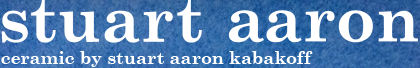
<style>
.page{position:relative;width:420px;height:68px}
.page>*{position:absolute;margin:0}
.t1{font:18px "CenturySchoolbook-Bold";color:#ffffff}
</style>
<div class="page">
<p class="t1" style="left:1px;top:51px;width:312px;height:16px">ceramic by stuart aaron kabakoff</p>
</div>
